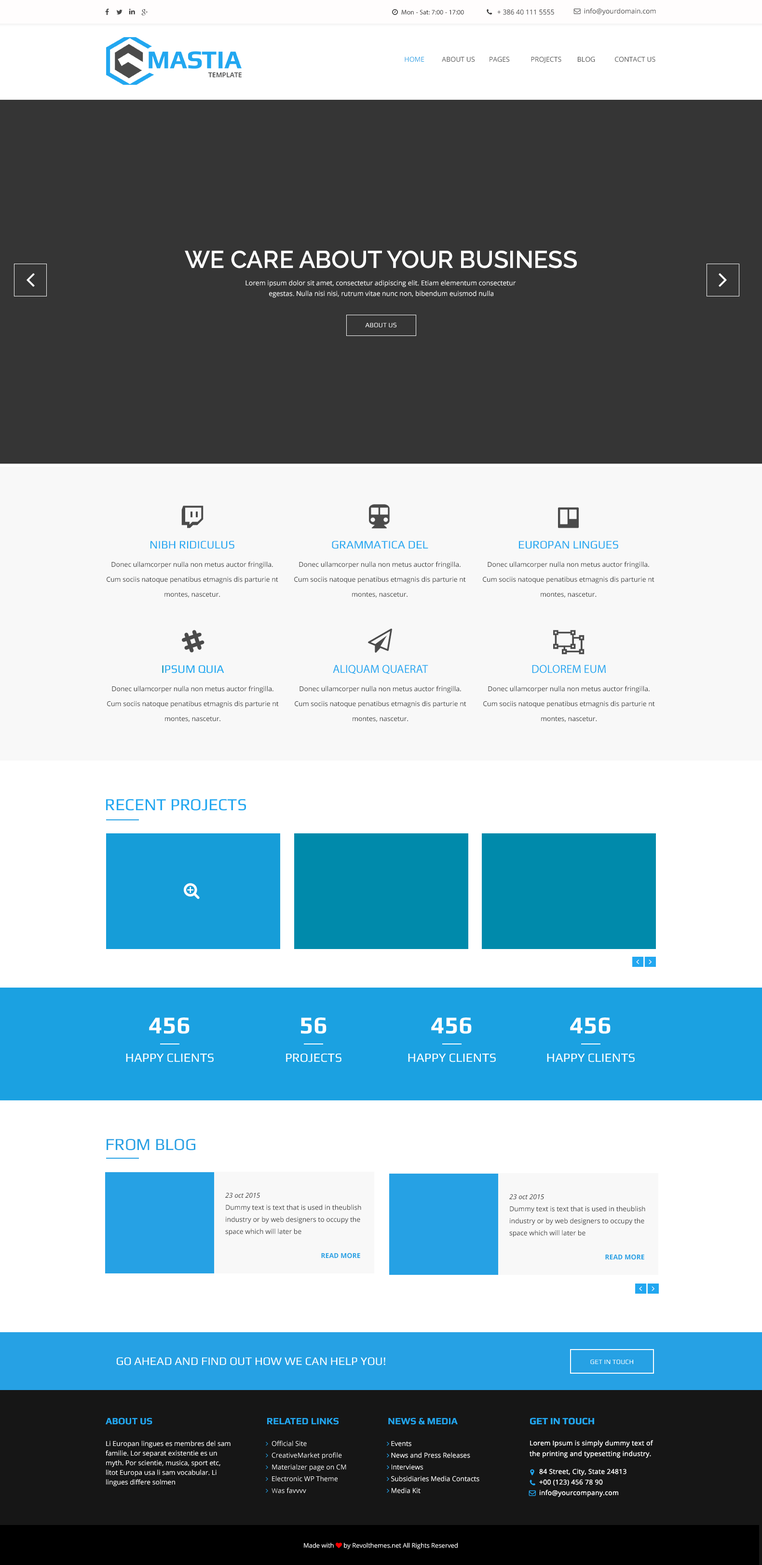
<style>
.page{position:relative;width:762px;height:1565px;background:#ffffff}
.page>*{position:absolute;margin:0}
.t1{font:6.7px "OpenSans";color:#4b4b4b;text-transform:uppercase}
.t2{font:6.7px "OpenSans";color:#26a1e4;text-transform:uppercase}
.t3{font:24.1px "Raleway-SemiBold";color:#ffffff;text-transform:uppercase}
.t4{font:6.7px/10.6px "OpenSans";color:#ffffff}
.t5{font:6.7px "Play";color:#ffffff;text-transform:uppercase}
.t6{font:11.6px "Play-Regular";color:#22a7f0;text-transform:uppercase}
.t7{font:6.7px/14.9px "OpenSans";color:#353535}
.t8{font:11.6px "Play";color:#22a7f0;text-transform:uppercase}
.t9{font:11.6px "Play";color:#008aab;text-transform:uppercase}
.t10{font:11.6px "MyriadPro-Regular";color:#22a7f0;text-transform:uppercase}
.t11{font:16.9px "Play";color:#22a7f0;text-transform:uppercase}
.t12{font:12.5px/28.4px "Play";color:#ffffff}
.t13{font:24.1px/28.4px "Play-Bold";color:#ffffff}
.t14{font:16.9px "Play-Regular";color:#26a1e4;text-transform:uppercase}
.t15{font:6.7px/12.1px "OpenSans";color:#353535}
.t16{font:6.7px/12.1px "OpenSans-Italic";color:#353535}
.t17{font:6.7px "OpenSans-Bold";color:#26a1e4}
.t18{font:11.6px "Play";color:#ffffff}
.t19{font:6.7px "Play";color:#ffffff}
.t20{font:9.6px "Play-Bold";color:#22a7f0;text-transform:uppercase}
.t21{font:6.7px/10.6px "OpenSans";letter-spacing:0.02em;color:#ffffff}
.t22{font:9.6px/10.6px "Play-Bold";color:#22a7f0;text-transform:uppercase}
.t23{font:6.7px/9.6px "OpenSans";color:#ffffff}
</style>
<div class="page">
<p class="t1" style="left:404px;top:56px;width:251px;height:7px"><span class="t2">HOME          </span>ABOUT US        Pages            PROJECTS         BLOG           Contact us</p>
<p class="t3" style="left:185px;top:251px;width:392px;height:18px">We care about your business</p>
<p class="t4" style="left:245px;top:280px;width:271px;height:18px;text-align:center">Lorem ipsum dolor sit amet, consectetur adipiscing elit. Etiam elementum consectetur <br>egestas. Nulla nisi nisi, rutrum vitae nunc non, bibendum euismod nulla</p>
<p class="t5" style="left:365px;top:323px;width:31px;height:5px">About US</p>
<p class="t6" style="left:150px;top:541px;width:84px;height:8px">Nibh Ridiculus</p>
<p class="t6" style="left:332px;top:541px;width:96px;height:8px">grammatica del</p>
<p class="t6" style="left:519px;top:541px;width:99px;height:8px">Europan lingues</p>
<p class="t7" style="left:107px;top:562px;width:171px;height:36px;text-align:center">Donec ullamcorper nulla non metus auctor fringilla. Cum sociis natoque penatibus etmagnis dis parturie nt montes, nascetur.</p>
<p class="t7" style="left:294px;top:562px;width:172px;height:36px;text-align:center">Donec ullamcorper nulla non metus auctor fringilla. Cum sociis natoque penatibus etmagnis dis parturie nt montes, nascetur.</p>
<p class="t7" style="left:483px;top:562px;width:171px;height:36px;text-align:center">Donec ullamcorper nulla non metus auctor fringilla. Cum sociis natoque penatibus etmagnis dis parturie nt montes, nascetur.</p>
<p class="t8" style="left:162px;top:665px;width:62px;height:9px"><span class="t9">i</span>psum quia</p>
<p class="t10" style="left:333px;top:665px;width:95px;height:9px">aliquam quaerat</p>
<p class="t10" style="left:532px;top:665px;width:74px;height:9px">dolorem eum</p>
<p class="t7" style="left:107px;top:686px;width:172px;height:36px;text-align:center">Donec ullamcorper nulla non metus auctor fringilla. Cum sociis natoque penatibus etmagnis dis parturie nt montes, nascetur.</p>
<p class="t7" style="left:295px;top:686px;width:171px;height:36px;text-align:center">Donec ullamcorper nulla non metus auctor fringilla. Cum sociis natoque penatibus etmagnis dis parturie nt montes, nascetur.</p>
<p class="t7" style="left:483px;top:686px;width:172px;height:36px;text-align:center">Donec ullamcorper nulla non metus auctor fringilla. Cum sociis natoque penatibus etmagnis dis parturie nt montes, nascetur.</p>
<p class="t11" style="left:106px;top:799px;width:140px;height:12px">Recent projects</p>
<p class="t12" style="left:126px;top:1018px;width:88px;height:45px;text-align:center"><span class="t13">456<br></span>HAPPY CLIENTS</p>
<p class="t12" style="left:286px;top:1018px;width:55px;height:45px;text-align:center"><span class="t13">56<br></span>PROJECTS</p>
<p class="t12" style="left:408px;top:1018px;width:88px;height:45px;text-align:center"><span class="t13">456<br></span>HAPPY CLIENTS</p>
<p class="t12" style="left:547px;top:1018px;width:87px;height:45px;text-align:center"><span class="t13">456<br></span>HAPPY CLIENTS</p>
<p class="t14" style="left:107px;top:1139px;width:88px;height:12px">FROM BLOG</p>
<p class="t15" style="left:225px;top:1193px;width:136px;height:43px"><span class="t16">23 oct 2015<br></span>Dummy text is text that is used in theublish industry or by web designers to occupy the space which will later be</p>
<p class="t15" style="left:509px;top:1194px;width:136px;height:44px"><span class="t16">23 oct 2015<br></span>Dummy text is text that is used in theublish industry or by web designers to occupy the space which will later be</p>
<p class="t17" style="left:321px;top:1253px;width:39px;height:6px">READ MORE</p>
<p class="t17" style="left:605px;top:1254px;width:39px;height:6px">READ MORE</p>
<p class="t18" style="left:117px;top:1358px;width:268px;height:8px">GO AHEAD AND FIND OUT HOW WE CAN HELP YOU!</p>
<p class="t19" style="left:590px;top:1360px;width:43px;height:5px">GET IN TOUCH</p>
<p class="t20" style="left:106px;top:1418px;width:46px;height:7px">About Us</p>
<p class="t20" style="left:267px;top:1418px;width:71px;height:7px">Related Links</p>
<p class="t20" style="left:388px;top:1418px;width:70px;height:7px">News &amp; Media</p>
<p class="t21" style="left:529px;top:1418px;width:124px;height:79px"><span class="t22">Get in touch<br><br></span>Lorem Ipsum is simply dummy text of the printing and typesetting industry. <br>84 Street, City, State 24813<br>+00 (123) 456 78 90<br>info@yourcompany.com</p>
<p class="t23" style="left:106px;top:1441px;width:124px;height:46px">Li Europan lingues es membres del sam familie. Lor separat existentie es un myth. Por scientie, musica, sport etc, litot Europa usa li sam vocabular. Li lingues differe solmen</p>
</div>
